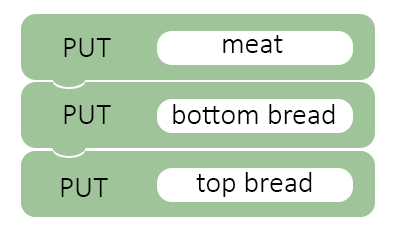
<style>
.page{position:relative;width:394px;height:233px;background:#a0c49a}
.page>*{position:absolute;margin:0}
.t1{font:30px "Calibri-Light";color:#000000}
</style>
<div class="page">
<p class="t1" style="left:64px;top:38px;width:47px;height:19px">PUT</p>
<p class="t1" style="left:223px;top:35px;width:60px;height:18px">meat</p>
<p class="t1" style="left:64px;top:105px;width:47px;height:19px">PUT</p>
<p class="t1" style="left:173px;top:104px;width:162px;height:20px">bottom bread</p>
<p class="t1" style="left:196px;top:172px;width:116px;height:25px">top bread</p>
<p class="t1" style="left:61px;top:178px;width:47px;height:19px">PUT</p>
</div>
